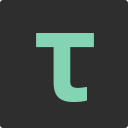
<style>
.page{position:relative;width:128px;height:128px;background:#2e2e2e}
.page>*{position:absolute;margin:0}
.t1{font:142px "Corbel-Bold";letter-spacing:-0.04em;color:#84d4b3}
</style>
<div class="page">
<p class="t1" style="left:36px;top:33px;width:58px;height:69px">τ</p>
</div>
